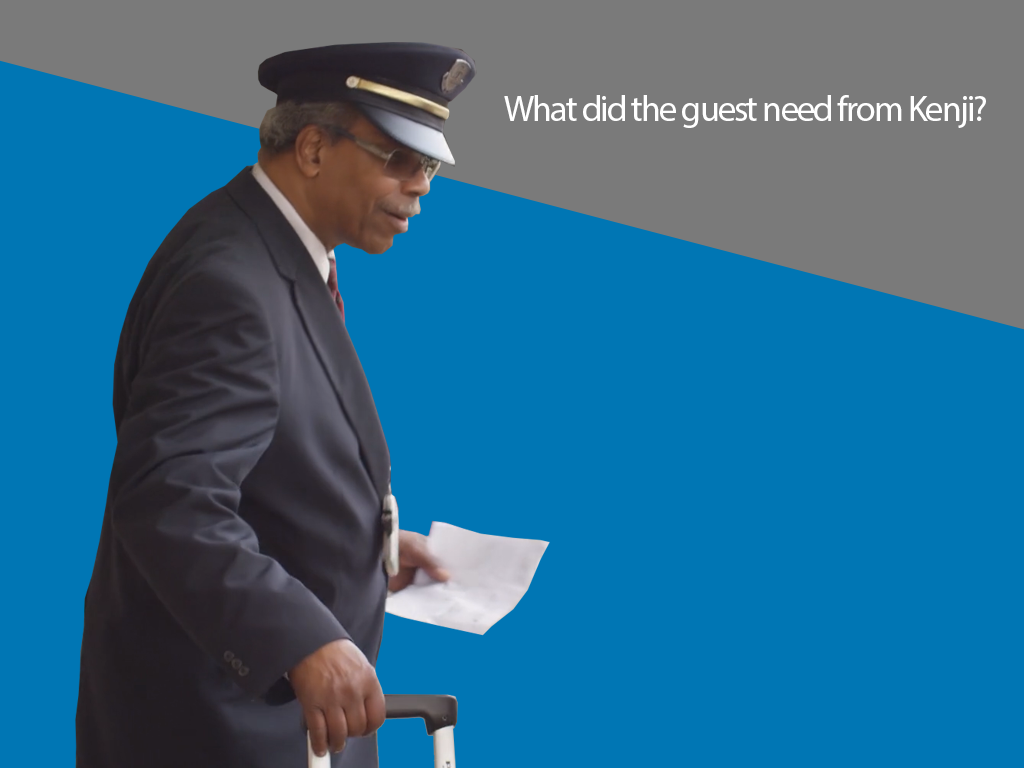
<style>
.page{position:relative;width:1024px;height:768px;background:#0076b4}
.page>*{position:absolute;margin:0}
.t1{font:36px "MyriadPro-Regular";letter-spacing:-0.05em;color:#ffffff}
</style>
<div class="page">
<p class="t1" style="left:504px;top:95px;width:482px;height:33px">What did the guest need from Kenji?</p>
</div>
